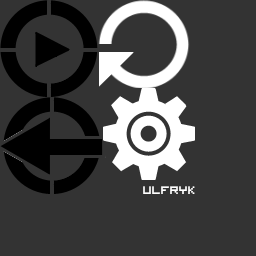
<style>
.page{position:relative;width:256px;height:256px;background:#333333}
.page>*{position:absolute;margin:0}
.t1{font:12px "GCChannelFStandard";color:#ffffff;text-transform:uppercase}
</style>
<div class="page">
<p class="t1" style="left:143px;top:186px;width:52px;height:8px">ulfryk</p>
</div>
